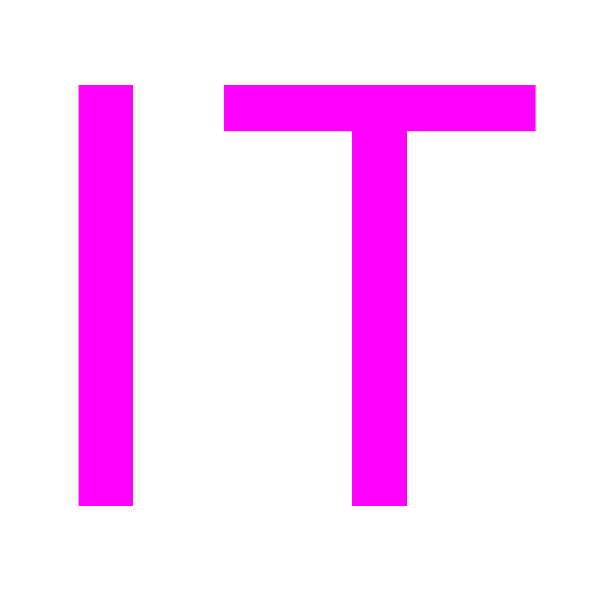
<style>
.page{position:relative;width:591px;height:591px;background:#ffffff}
.page>*{position:absolute;margin:0}
.t1{font:625px "MyriadPro-Regular";letter-spacing:0.07em;color:#ff00ff}
</style>
<div class="page">
<p class="t1" style="left:78px;top:85px;width:458px;height:421px">IT</p>
</div>
